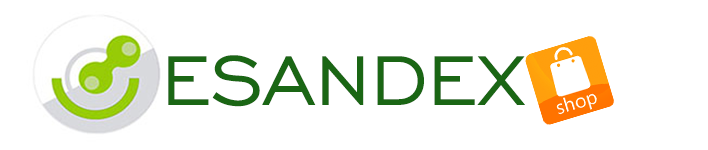
<style>
.page{position:relative;width:708px;height:150px;background:#ffffff}
.page>*{position:absolute;margin:0}
.t1{font:90px "EngraversGothicBT-Regular";color:#1a6614}
</style>
<div class="page">
<p class="t1" style="left:168px;top:55px;width:357px;height:52px">ESANDEX</p>
</div>
